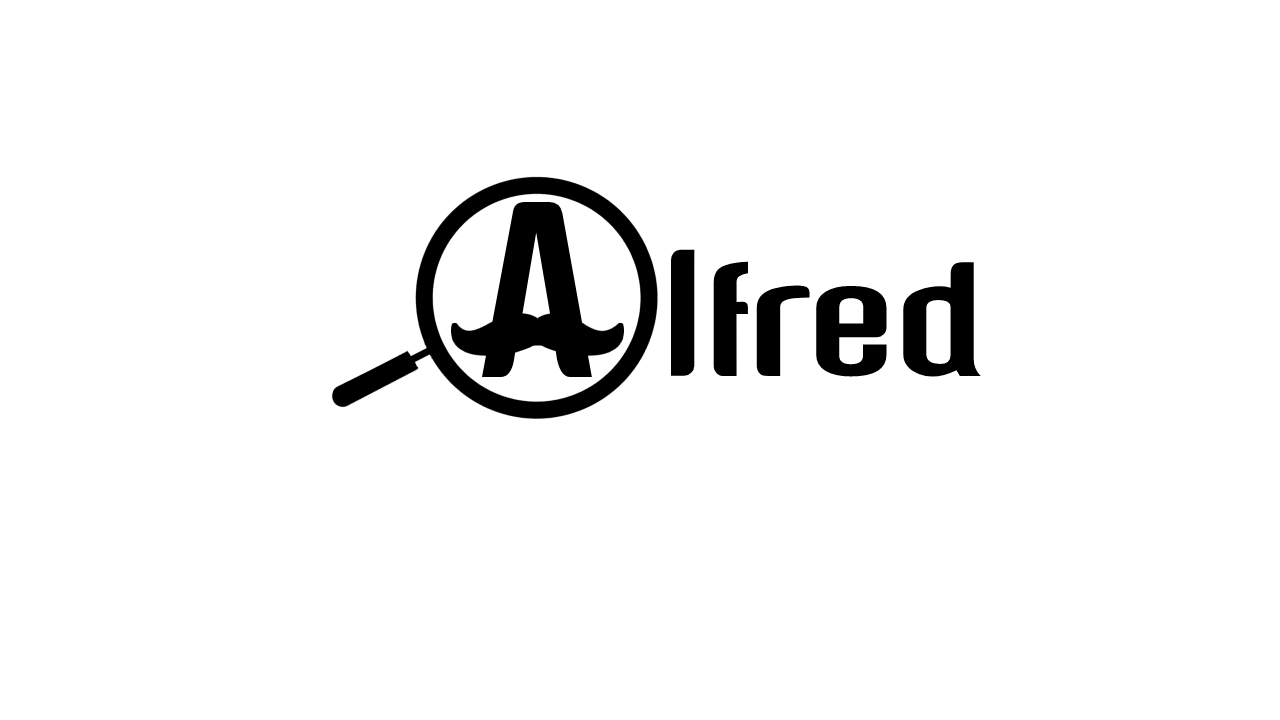
<style>
.page{position:relative;width:1280px;height:720px;background:#ffffff}
.page>*{position:absolute;margin:0}
.t1{font:250px "GenghisKhan-";color:#000000}
.t2{font:180px "GenghisKhan-";color:#000000}
</style>
<div class="page">
<p class="t1" style="left:482px;top:202px;width:110px;height:176px">A</p>
<p class="t2" style="left:670px;top:249px;width:311px;height:128px">Ifred</p>
</div>
